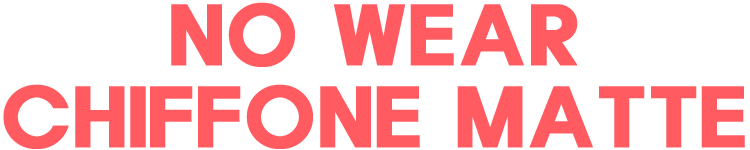
<style>
.page{position:relative;width:750px;height:150px;background:#ffffff}
.page>*{position:absolute;margin:0}
.t1{font:85.2px/81.8px "HaanYHeadB";color:#ff5b61;text-transform:uppercase;font-weight:bold}
</style>
<div class="page">
<p class="t1" style="left:3px;top:2px;width:742px;height:147px;text-align:center">no wear<br>chiffone matte</p>
</div>
